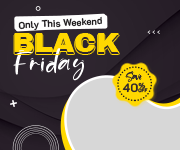
<style>
.page{position:relative;width:180px;height:150px;background:#d7d7d7}
.page>*{position:absolute;margin:0}
.t1{font:9.6px "K2D-SemiBold";color:#1d1a1c}
.t2{font:27.8px "ArchivoBlack-Regular";color:#ffd800}
.t3{font:34.2px "Sand-Beach";letter-spacing:0.055em;color:#ffffff}
.t4{font:12.1px "Sand-Beach";color:#2f2730}
.t5{font:12.1px "K2D-Bold";color:#2f2730}
.t6{font:4.8px "K2D-Bold";color:#2f2730}
</style>
<div class="page">
<p class="t1" style="left:18px;top:16px;width:84px;height:15px;rotate:-3deg">Only This Weekend</p>
<p class="t2" style="left:14px;top:33px;width:105px;height:19px">BLACK</p>
<p class="t2" style="left:14px;top:35px;width:105px;height:19px">BLACK</p>
<p class="t3" style="left:13px;top:48px;width:71px;height:33px">Friday</p>
<p class="t4" style="left:125px;top:71px;width:17px;height:11px">Save</p>
<p class="t5" style="left:122px;top:82px;width:24px;height:11px">40%</p>
<p class="t6" style="left:138px;top:88px;width:10px;height:5px">OFF</p>
</div>
